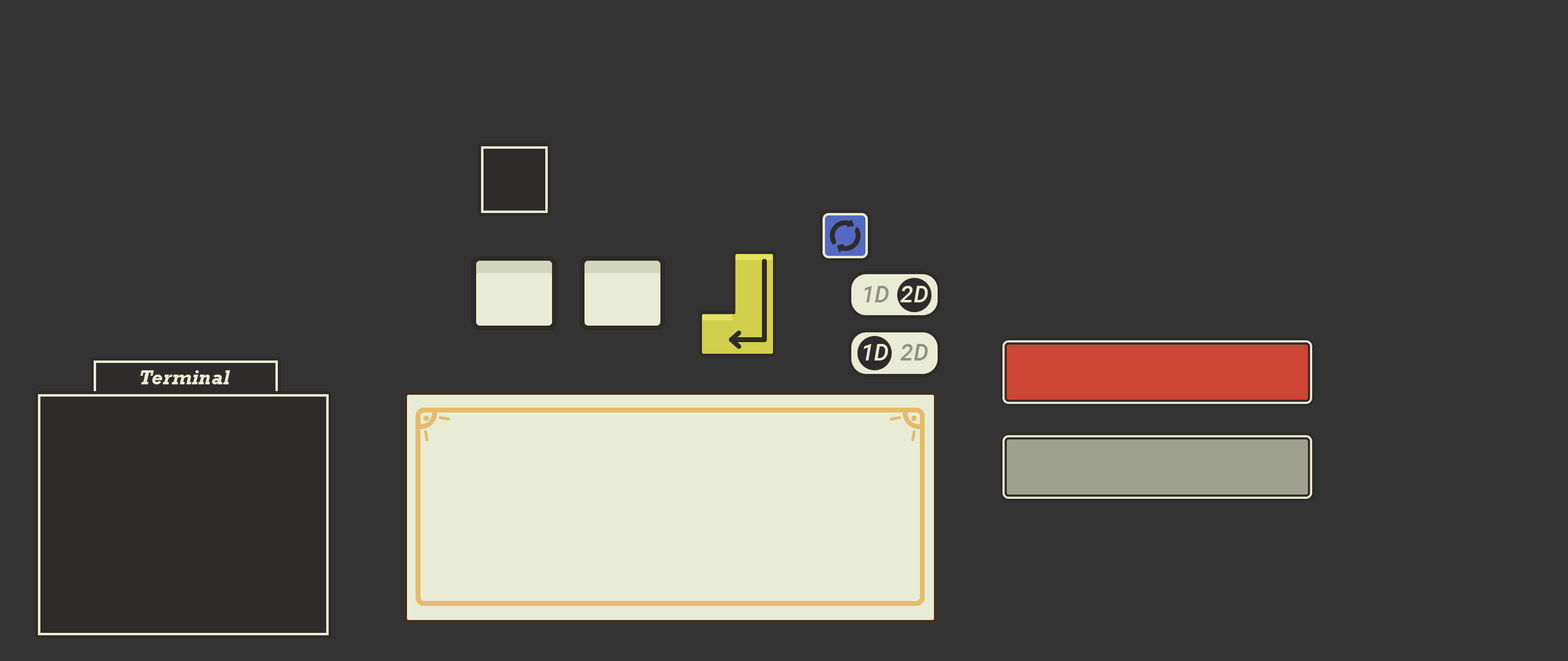
<style>
.page{position:relative;width:1568px;height:661px;background:#333333}
.page>*{position:absolute;margin:0}
.t1{font:23.5px "Roboto-MediumItalic";color:#909183}
.t2{font:23.5px "Roboto-MediumItalic";color:#e9ecd4}
.t3{font:20.4px "Rockwell-BoldItalic";color:#e9ecd4}
</style>
<div class="page">
<p class="t1" style="left:864px;top:286px;width:25px;height:16px">1D</p>
<p class="t2" style="left:900px;top:286px;width:28px;height:16px">2D</p>
<p class="t2" style="left:864px;top:344px;width:24px;height:16px">1D</p>
<p class="t1" style="left:900px;top:344px;width:28px;height:16px">2D</p>
<p class="t3" style="left:140px;top:370px;width:90px;height:14px">Terminal</p>
</div>
